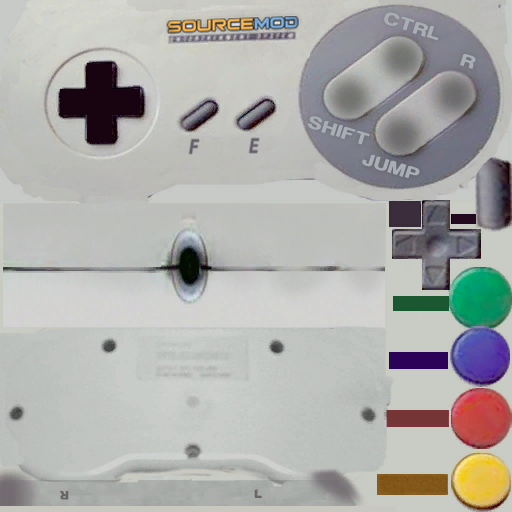
<style>
.page{position:relative;width:512px;height:512px}
.page>*{position:absolute;margin:0}
.t1{font:18px "Harabara";letter-spacing:0.06em;color:#a8aeb4;font-weight:bold;scale:1.26 1}
.t2{font:18px "Harabara";letter-spacing:-0.1em;color:#a8aeb4;font-weight:bold;scale:1.26 1}
.t3{font:19.4px "MicrosoftTaiLe";color:#655e6b;font-weight:bold;font-style:italic;scale:0.93 1}
</style>
<div class="page">
<p class="t1" style="left:384px;top:12px;width:55px;height:29px;rotate:18deg">CTRL</p>
<p class="t2" style="left:460px;top:54px;width:16px;height:15px;rotate:18deg">R</p>
<p class="t1" style="left:308px;top:116px;width:62px;height:29px;rotate:18deg">SHIFT</p>
<p class="t3" style="left:189px;top:139px;width:10px;height:15px">F</p>
<p class="t3" style="left:249px;top:138px;width:10px;height:15px">E</p>
<p class="t1" style="left:362px;top:154px;width:58px;height:24px;rotate:18deg">JUMP</p>
</div>
